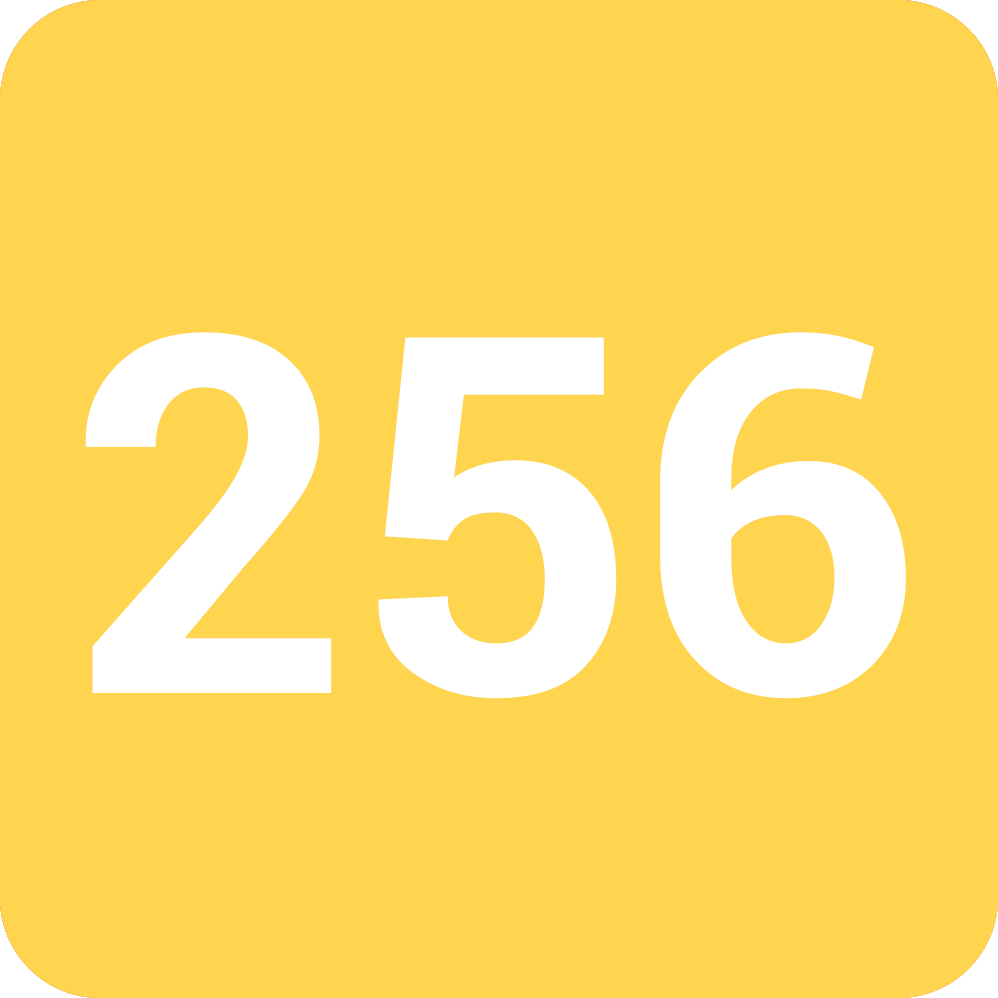
<style>
.page{position:relative;width:998px;height:998px;background:#ffd550}
.page>*{position:absolute;margin:0}
.t1{font:500px "Roboto-Bold";color:#ffffff}
</style>
<div class="page">
<p class="t1" style="left:85px;top:332px;width:821px;height:367px">256</p>
</div>
